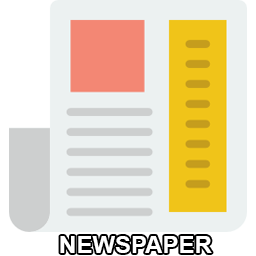
<style>
.page{position:relative;width:256px;height:256px;background:#ecf1f1}
.page>*{position:absolute;margin:0}
.t1{font:24px "Arial-BoldMT";color:#ffffff}
</style>
<div class="page">
<p class="t1" style="left:60px;top:236px;width:152px;height:17px">NEWSPAPER</p>
</div>
